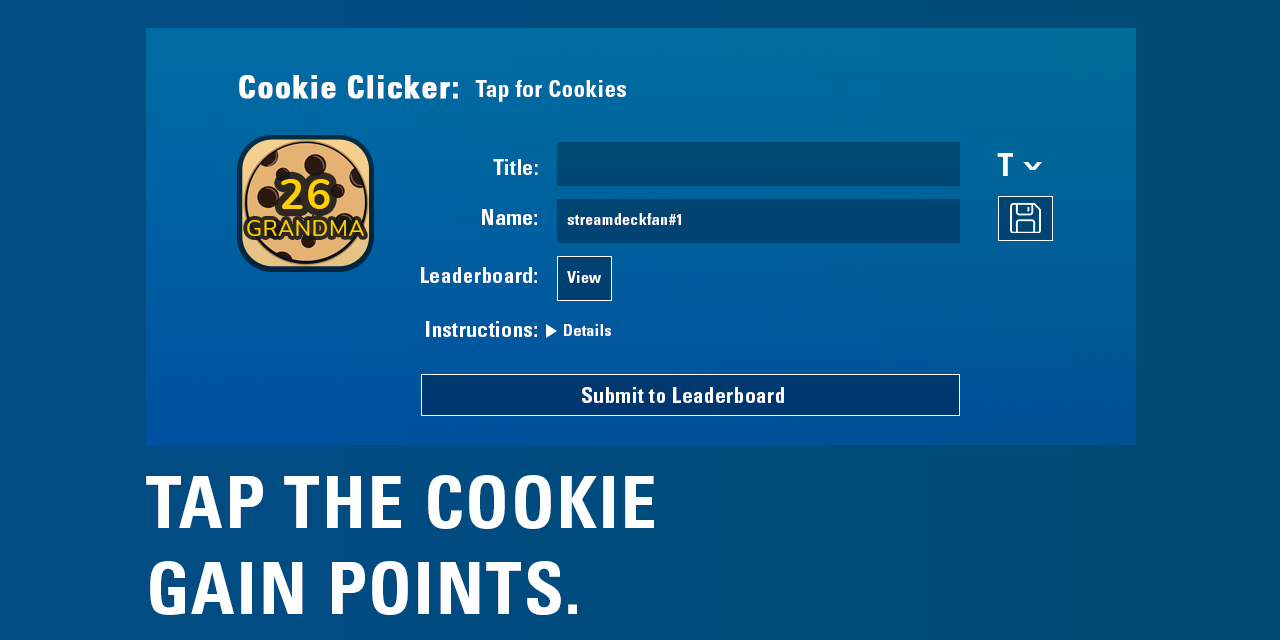
<style>
.page{position:relative;width:1280px;height:640px}
.page>*{position:absolute;margin:0}
.t1{font:31.7px "Univers-CondensedBold";letter-spacing:0.025em;color:#ffffff;font-weight:bold}
.t2{font:22.9px "Univers-CondensedBold";letter-spacing:0.025em;color:#ffffff}
.t3{font:21.1px "Univers-CondensedBold";letter-spacing:0.025em;color:#ffffff}
.t4{font:31.7px "Univers-CondensedBold";letter-spacing:0.025em;color:#ffffff}
.t5{font:34.1px "Univers-CondensedBold";letter-spacing:0.025em;color:#ffffff;scale:1.88 1}
.t6{font:42.5px "Nunito-Bold";letter-spacing:0.025em;color:#ffcf00;text-transform:uppercase}
.t7{font:22.3px "Nunito-Regular";letter-spacing:0.025em;color:#ffcf00;text-transform:uppercase}
.t8{font:15.8px "Univers-CondensedBold";letter-spacing:0.025em;color:#ffffff}
.t9{font:72px "Univers-CondensedBold";letter-spacing:0.025em;color:#ffffff;text-transform:uppercase}
</style>
<div class="page">
<p class="t1" style="left:239px;top:75px;width:219px;height:24px">Cookie Clicker:</p>
<p class="t2" style="left:475px;top:80px;width:151px;height:22px">Tap for Cookies</p>
<p class="t3" style="left:493px;top:159px;width:45px;height:16px">Title:</p>
<p class="t4" style="left:997px;top:153px;width:16px;height:23px">T</p>
<p class="t5" style="left:1023px;top:162px;width:19px;height:8px;rotate:180deg">^</p>
<p class="t6" style="left:281px;top:179px;width:49px;height:30px">26</p>
<p class="t3" style="left:482px;top:209px;width:55px;height:16px">Name:</p>
<p class="t7" style="left:247px;top:220px;width:117px;height:16px">GRANDMA</p>
<p class="t8" style="left:567px;top:213px;width:114px;height:12px">streamdeckfan#1</p>
<p class="t3" style="left:421px;top:267px;width:116px;height:16px">Leaderboard:</p>
<p class="t8" style="left:567px;top:271px;width:34px;height:12px">View</p>
<p class="t3" style="left:426px;top:321px;width:111px;height:16px">Instructions:</p>
<p class="t8" style="left:564px;top:324px;width:47px;height:12px">Details</p>
<p class="t3" style="left:582px;top:387px;width:202px;height:16px">Submit to Leaderboard</p>
<p class="t9" style="left:146px;top:475px;width:508px;height:140px">TAP THE COOKIE<br>GAIN POINTS.</p>
</div>
